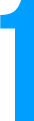
<style>
.page{position:relative;width:34px;height:121px;background:#009fff}
.page>*{position:absolute;margin:0}
.t1{font:173px "BebasNeueBold";color:#009fff}
</style>
<div class="page">
<p class="t1" style="left:0px;top:0px;width:34px;height:121px">1</p>
</div>
